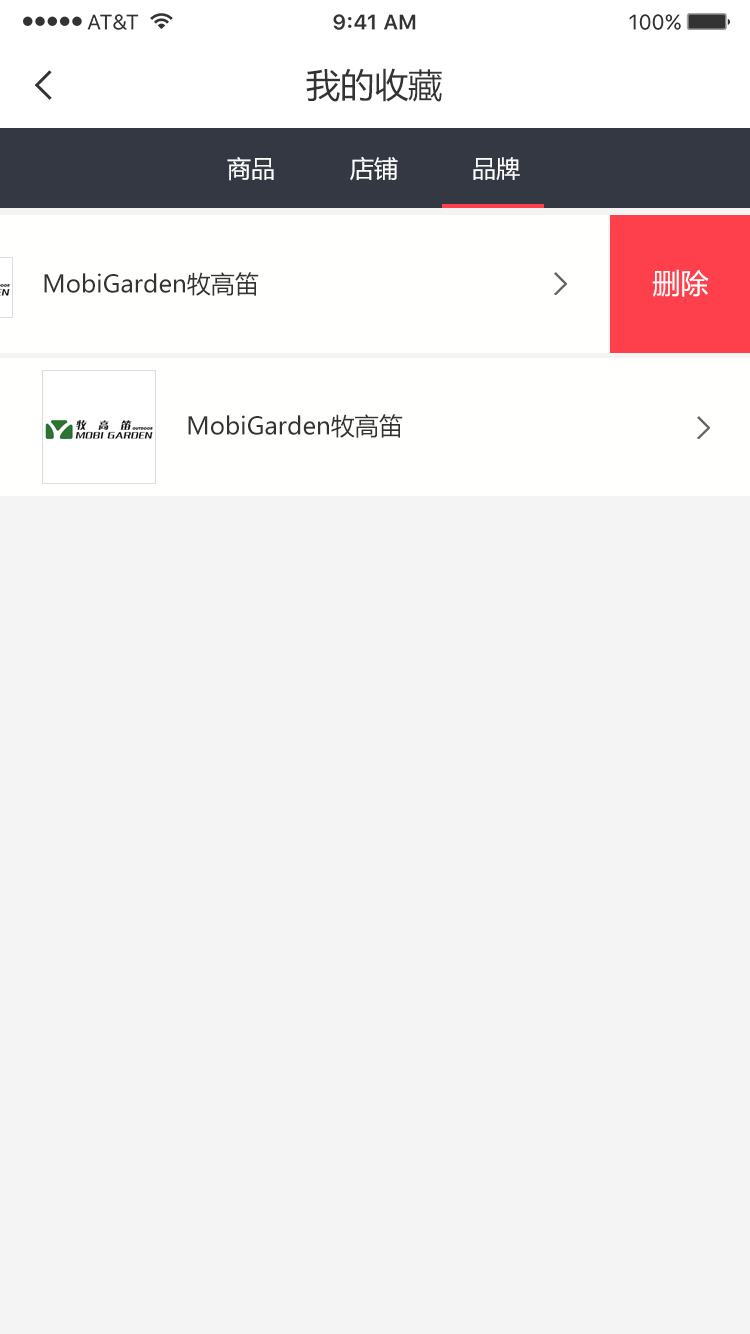
<style>
.page{position:relative;width:750px;height:1334px;background:#f4f4f4}
.page>*{position:absolute;margin:0}
.t1{font:34px "MicrosoftYaHei";color:#333333}
.t2{font:24px "MicrosoftYaHei";color:#ffffff}
.t3{font:28px "MicrosoftYaHei";color:#ffffff}
.t4{font:24px "MicrosoftYaHei";color:#333333}
</style>
<div class="page">
<p class="t1" style="left:306px;top:68px;width:136px;height:34px">我的收藏</p>
<p class="t2" style="left:227px;top:157px;width:47px;height:24px">商品</p>
<p class="t2" style="left:350px;top:156px;width:48px;height:25px">店铺</p>
<p class="t2" style="left:473px;top:157px;width:47px;height:24px">品牌</p>
<p class="t3" style="left:652px;top:269px;width:57px;height:28px">删除</p>
<p class="t4" style="left:44px;top:272px;width:215px;height:24px">MobiGarden牧高笛</p>
<p class="t4" style="left:188px;top:414px;width:215px;height:24px">MobiGarden牧高笛</p>
</div>
